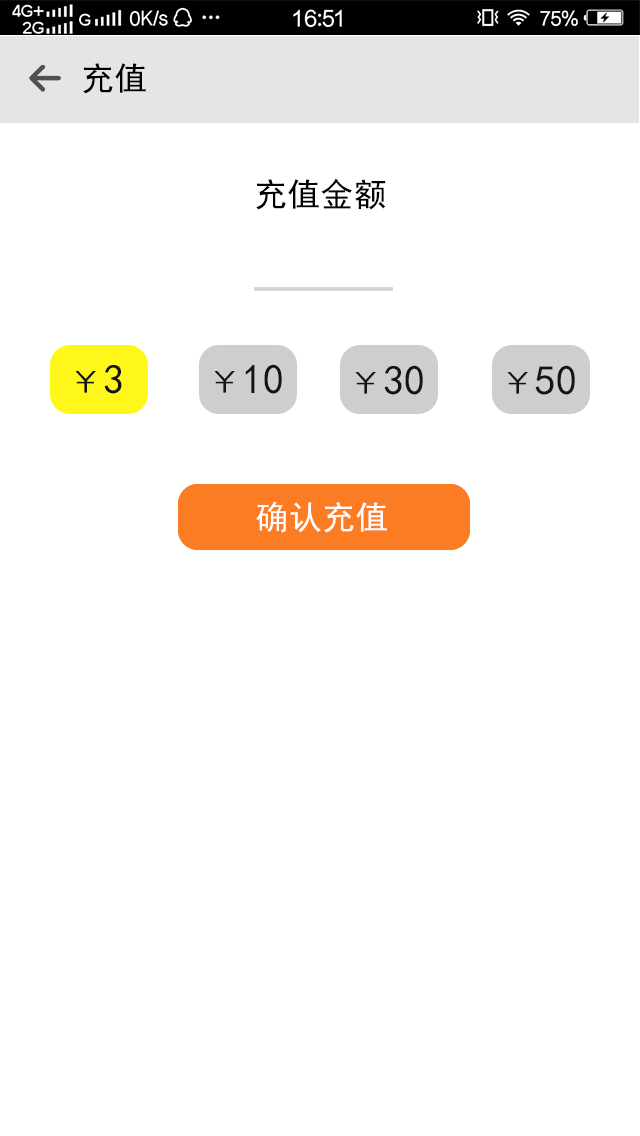
<style>
.page{position:relative;width:640px;height:1136px;background:#ffffff}
.page>*{position:absolute;margin:0}
.t1{font:33.3px "SimHei";letter-spacing:0.002em;color:#000000}
.t2{font:33.3px "SimHei";letter-spacing:0.002em;color:#010101}
.t3{font:33.3px "SimHei";letter-spacing:0.002em;color:#141414}
.t4{font:41.7px "SimHei";letter-spacing:0.002em;color:#141414}
.t5{font:33.3px "SimHei";letter-spacing:0.002em;color:#ffffff}
</style>
<div class="page">
<p class="t1" style="left:83px;top:63px;width:63px;height:31px">充值</p>
<p class="t2" style="left:256px;top:178px;width:130px;height:32px">充值金额</p>
<p class="t3" style="left:75px;top:365px;width:47px;height:29px">￥<span class="t4">3</span></p>
<p class="t4" style="left:214px;top:364px;width:68px;height:30px"><span class="t3">￥</span>10</p>
<p class="t4" style="left:355px;top:365px;width:68px;height:30px"><span class="t3">￥</span>30</p>
<p class="t4" style="left:507px;top:365px;width:68px;height:30px"><span class="t3">￥</span>50</p>
<p class="t5" style="left:256px;top:501px;width:131px;height:32px">确认充值</p>
</div>
